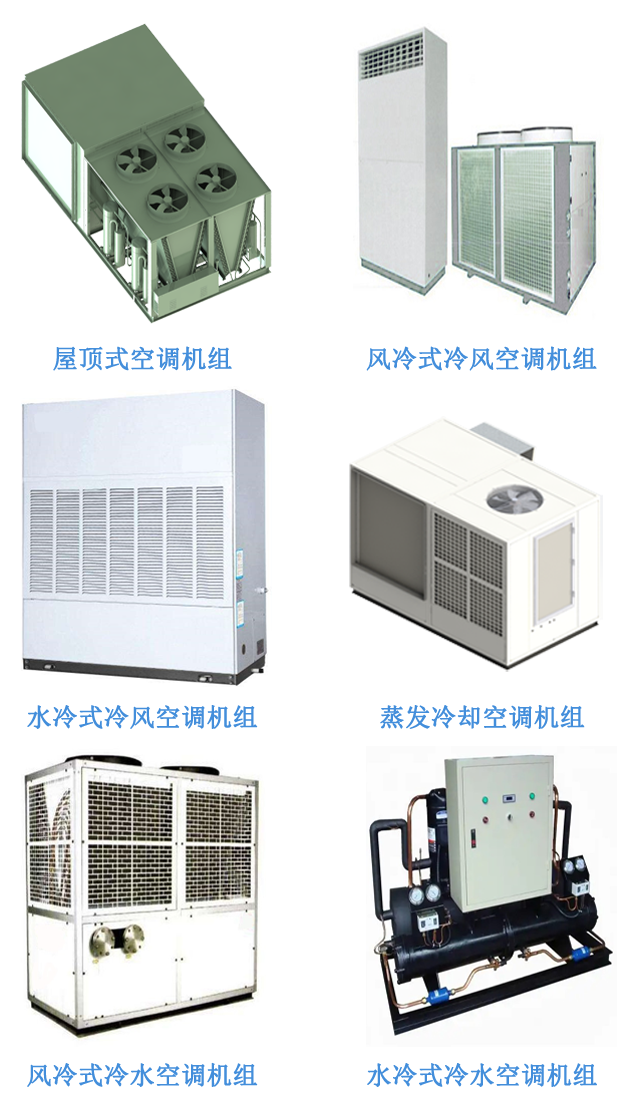
<style>
.page{position:relative;width:640px;height:1095px;background:#ffffff}
.page>*{position:absolute;margin:0}
.t1{font:25.1px "SimSun";color:#438edb;font-weight:bold}
</style>
<div class="page">
<p class="t1" style="left:53px;top:346px;width:179px;height:25px">屋顶式空调机组</p>
<p class="t1" style="left:366px;top:346px;width:231px;height:25px">风冷式冷风空调机组</p>
<p class="t1" style="left:27px;top:705px;width:231px;height:24px">水冷式冷风空调机组</p>
<p class="t1" style="left:380px;top:705px;width:205px;height:24px">蒸发冷却空调机组</p>
<p class="t1" style="left:27px;top:1062px;width:231px;height:25px">风冷式冷水空调机组</p>
<p class="t1" style="left:367px;top:1062px;width:230px;height:25px">水冷式冷水空调机组</p>
</div>
